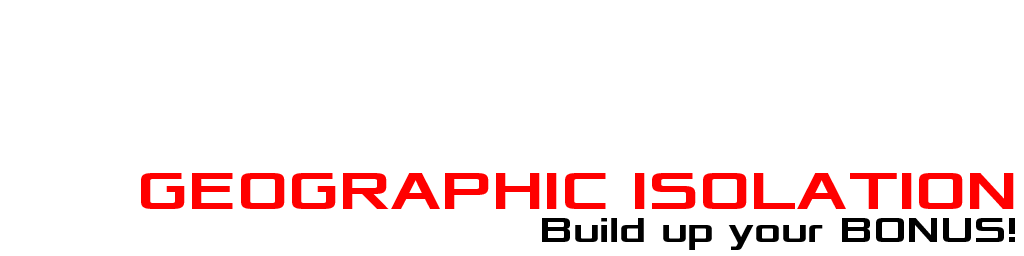
<style>
.page{position:relative;width:1024px;height:256px;background:#ffffff}
.page>*{position:absolute;margin:0}
.t1{font:55px "Xolonium-Bold";color:#ff0000}
.t2{font:36px "Xolonium-Bold";color:#000000}
</style>
<div class="page">
<p class="t1" style="left:141px;top:173px;width:873px;height:36px">GEOGRAPHIC ISOLATION</p>
<p class="t2" style="left:542px;top:218px;width:473px;height:32px">Build up your BONUS!</p>
</div>
